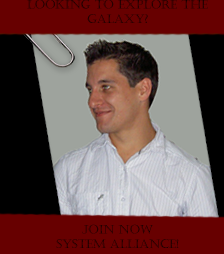
<style>
.page{position:relative;width:224px;height:254px;background:#670000}
.page>*{position:absolute;margin:0}
.t1{font:12px "Castellar"}
</style>
<div class="page">
<p class="t1" style="left:27px;top:0px;width:181px;height:23px;text-align:center">Looking to explore the<br>galaxy?</p>
<p class="t1" style="left:56px;top:224px;width:123px;height:25px;text-align:center">Join Now<br>System alliance!</p>
</div>
